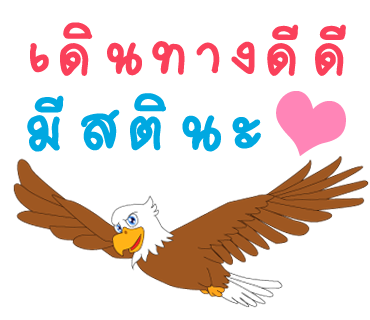
<style>
.page{position:relative;width:370px;height:320px;background:#ffffff}
.page>*{position:absolute;margin:0}
.t1{font:89px "2005_iannnnnMTV";letter-spacing:0.075em;color:#fa405a;scale:1.06 1}
.t2{font:98px "2005_iannnnnMTV";letter-spacing:0.075em;color:#00a8e1;scale:1.06 1}
</style>
<div class="page">
<p class="t1" style="left:30px;top:22px;width:316px;height:54px">เดินทางดีดี</p>
<p class="t2" style="left:27px;top:93px;width:234px;height:59px">มีสตินะ</p>
</div>
